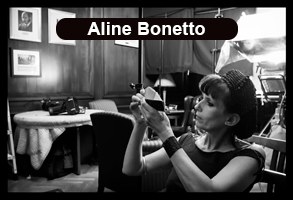
<style>
.page{position:relative;width:293px;height:200px}
.page>*{position:absolute;margin:0}
.t1{font:18px "Arial-BoldMT";letter-spacing:0.005em;color:#ffffff}
</style>
<div class="page">
<p class="t1" style="left:87px;top:22px;width:118px;height:13px">Aline Bonetto</p>
</div>
